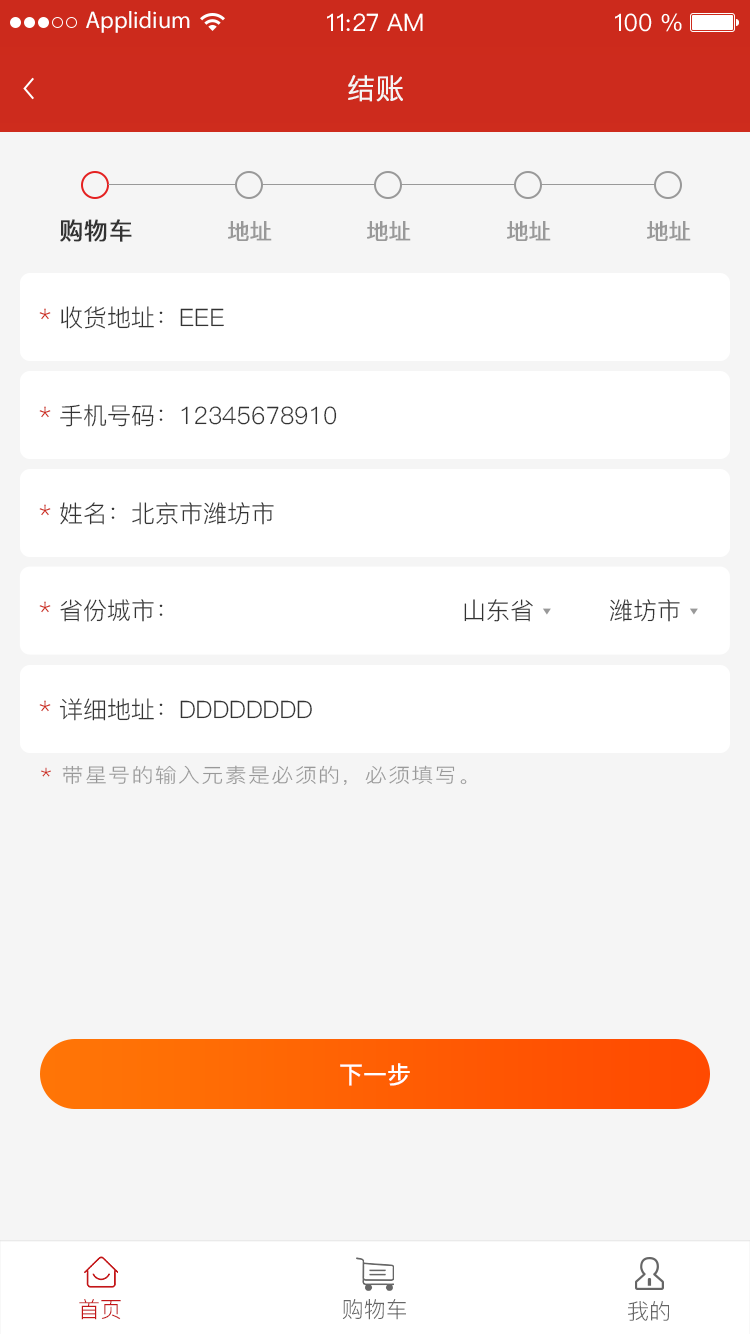
<style>
.page{position:relative;width:750px;height:1334px;background:#f5f5f5}
.page>*{position:absolute;margin:0}
.t1{font:24px "MyriadPro-Regular";color:#ffffff}
.t2{font:24px "PingFangSC-Regular";color:#ffffff}
.t3{font:28px "PingFang-SC-Regular";color:#f5f5f5;text-transform:uppercase;font-weight:bold}
.t4{font:24px "PingFang-SC-Medium";color:#333333;text-transform:uppercase;font-weight:bold}
.t5{font:22px "PingFang-SC-Medium";color:#999999;text-transform:uppercase;font-weight:bold}
.t6{font:24px "PingFang-SC-Regular";color:#333333;text-transform:uppercase}
.t7{font:24px "PingFang-SC-Regular";color:#cd2b1d;text-transform:uppercase}
.t8{font:19.8px "PingFang-SC-Regular";letter-spacing:0.06em;color:#999999;text-transform:uppercase;scale:1.11 1}
.t9{font:19.8px "PingFang-SC-Regular";letter-spacing:0.06em;color:#cd2b1d;text-transform:uppercase;scale:1.11 1}
.t10{font:24px "PingFang-SC-Bold";color:#ffffff;text-transform:uppercase}
.t11{font:22px "PingFang-SC-Regular";color:#c31618}
.t12{font:22px "PingFang-SC-Regular";color:#666666}
</style>
<div class="page">
<p class="t1" style="left:86px;top:11px;width:104px;height:22px">Applidium</p>
<p class="t2" style="left:327px;top:13px;width:96px;height:18px">11:27 AM</p>
<p class="t2" style="left:615px;top:13px;width:67px;height:19px">100 %</p>
<p class="t3" style="left:348px;top:75px;width:55px;height:27px">结账</p>
<p class="t4" style="left:60px;top:219px;width:72px;height:23px">购物车</p>
<p class="t5" style="left:228px;top:221px;width:44px;height:20px">地址</p>
<p class="t5" style="left:367px;top:221px;width:44px;height:20px">地址</p>
<p class="t5" style="left:507px;top:221px;width:44px;height:20px">地址</p>
<p class="t5" style="left:647px;top:221px;width:44px;height:20px">地址</p>
<p class="t6" style="left:39px;top:306px;width:185px;height:23px"><span class="t7">*</span> 收货地址：eee</p>
<p class="t6" style="left:39px;top:404px;width:298px;height:23px"><span class="t7">*</span> 手机号码：12345678910</p>
<p class="t6" style="left:39px;top:502px;width:235px;height:23px"><span class="t7">*</span> 姓名：北京市潍坊市</p>
<p class="t6" style="left:39px;top:599px;width:124px;height:23px"><span class="t7">*</span> 省份城市：</p>
<p class="t6" style="left:464px;top:599px;width:69px;height:23px">山东省</p>
<p class="t6" style="left:610px;top:599px;width:70px;height:23px">潍坊市</p>
<p class="t6" style="left:39px;top:698px;width:273px;height:23px"><span class="t7">*</span> 详细地址：dddddddd</p>
<p class="t8" style="left:41px;top:765px;width:426px;height:20px"><span class="t9">*</span> 带星号的输入元素是必须的，必须填写。</p>
<p class="t10" style="left:340px;top:1063px;width:70px;height:23px">下一步</p>
<p class="t11" style="left:79px;top:1299px;width:42px;height:21px">首页</p>
<p class="t12" style="left:342px;top:1299px;width:64px;height:21px">购物车</p>
<p class="t12" style="left:628px;top:1301px;width:41px;height:20px">我的</p>
</div>
